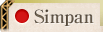
<style>
.page{position:relative;width:103px;height:32px}
.page>*{position:absolute;margin:0}
.t1{font:18px "RyuminPro-ExBold";letter-spacing:-0.04em;color:#605546}
</style>
<div class="page">
<p class="t1" style="left:34px;top:9px;width:60px;height:17px">Simpan</p>
</div>
